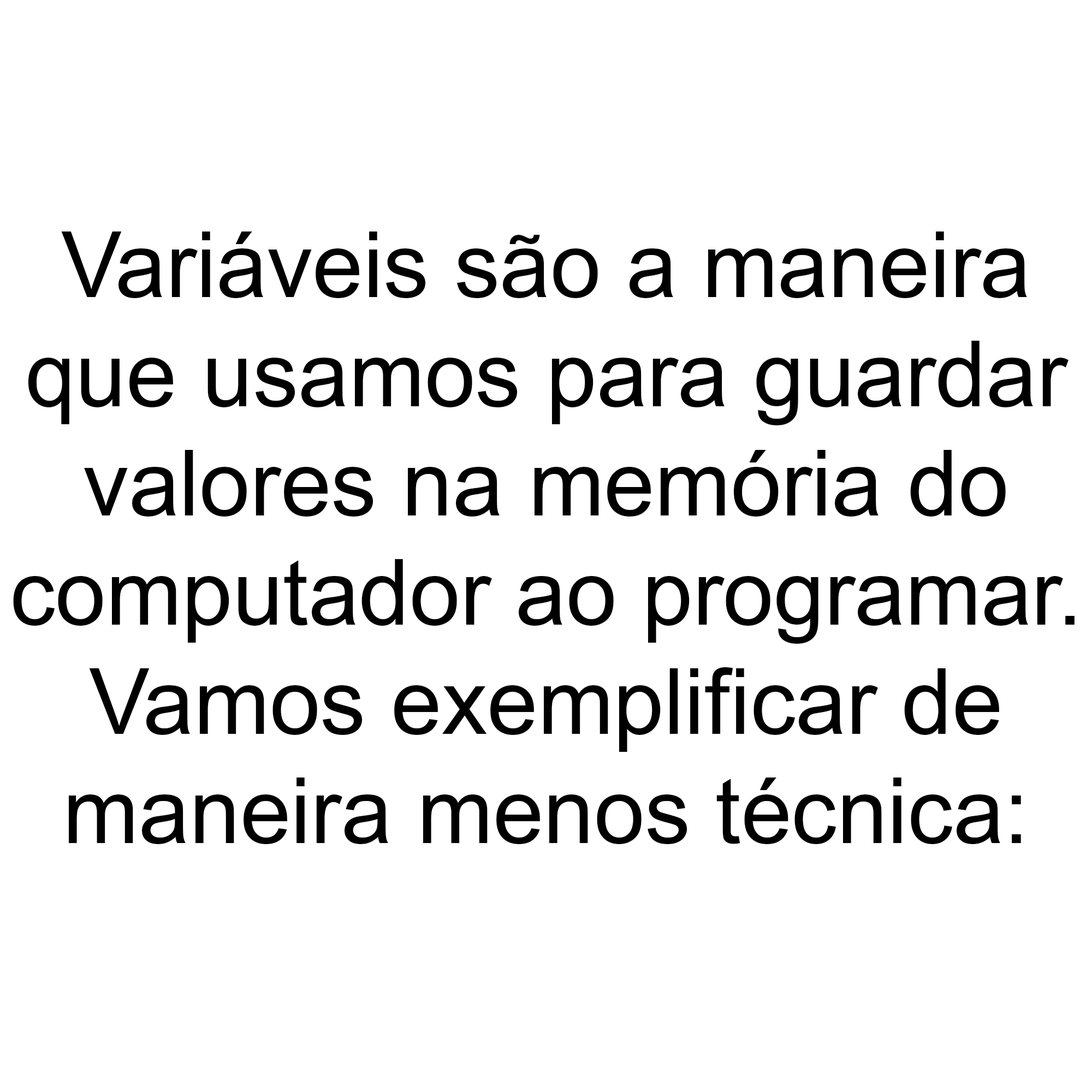
<style>
.page{position:relative;width:1092px;height:1092px;background:#ffffff}
.page>*{position:absolute;margin:0}
.t1{font:91px "ArialMT";color:#000000}
</style>
<div class="page">
<p class="t1" style="left:13px;top:232px;width:1062px;height:612px;text-align:center">Variáveis são a maneira<br>que usamos para guardar<br>valores na memória do<br>computador ao programar.<br>Vamos exemplificar de<br>maneira menos técnica:</p>
</div>
